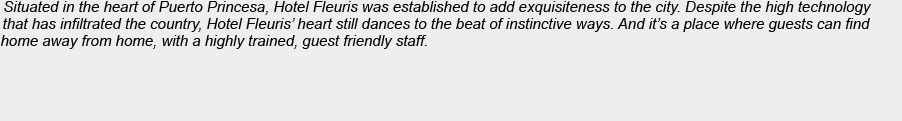
<style>
.page{position:relative;width:902px;height:121px;background:#edeef0}
.page>*{position:absolute;margin:0}
.t1{font:15px "Arial-ItalicMT";color:#000000}
</style>
<div class="page">
<p class="t1" style="left:4px;top:1px;width:867px;height:14px">Situated in the heart of Puerto Princesa, Hotel Fleuris was established to add exquisiteness to the city. Despite the high technology</p>
<p class="t1" style="left:3px;top:18px;width:867px;height:14px">that has infiltrated the country, Hotel Fleuris’ heart still dances to the beat of instinctive ways. And it’s a place where guests can find</p>
</div>
